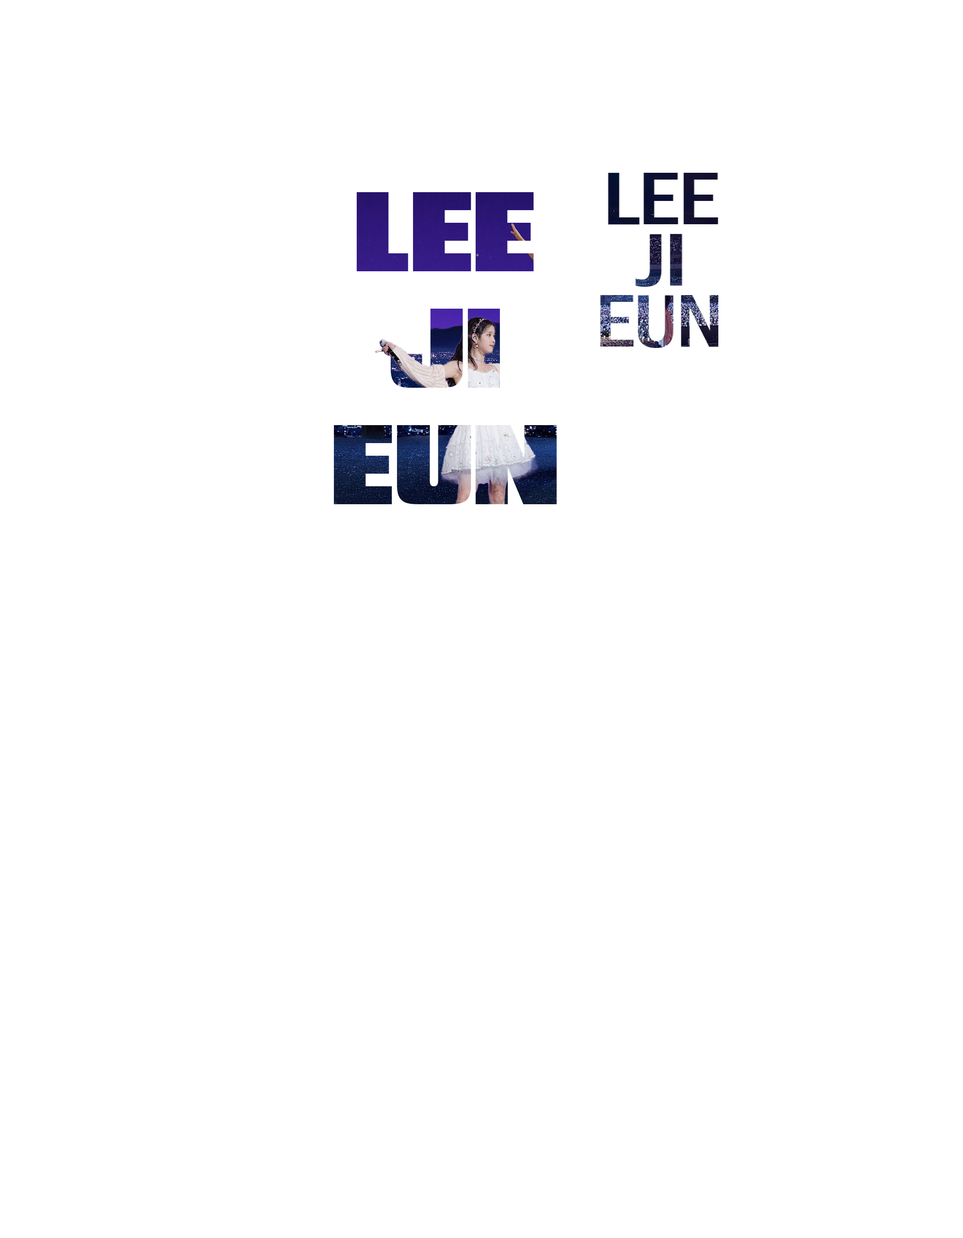
<style>
.page{position:relative;width:963px;height:1238px;background:#ffffff}
.page>*{position:absolute;margin:0}
.t1{font:97.1px "RepublicaMinor2.0"}
</style>
<div class="page">
<p class="t1" style="left:333px;top:192px;width:224px;height:312px;text-align:center">LEE<br>JI<br>EUN</p>
</div>
